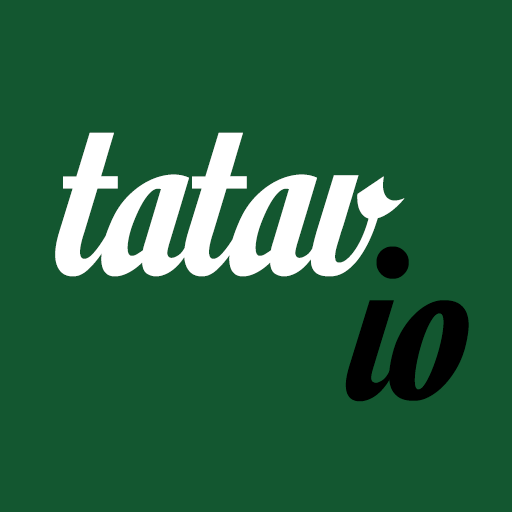
<style>
.page{position:relative;width:512px;height:512px;background:#135730}
.page>*{position:absolute;margin:0}
.t1{font:266.7px "MotionPicturePersonalUse";color:#ffffff}
.t2{font:266.7px "MotionPicturePersonalUse";color:#000000}
</style>
<div class="page">
<p class="t1" style="left:55px;top:132px;width:350px;height:145px">tatav.</p>
<p class="t2" style="left:345px;top:246px;width:124px;height:156px">io</p>
</div>
